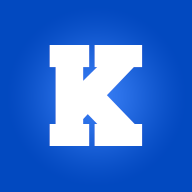
<style>
.page{position:relative;width:192px;height:192px;background:#0249c0}
.page>*{position:absolute;margin:0}
.t1{font:120.2px "Freshman";color:#ffffff}
</style>
<div class="page">
<p class="t1" style="left:49px;top:45px;width:94px;height:101px">K</p>
</div>
